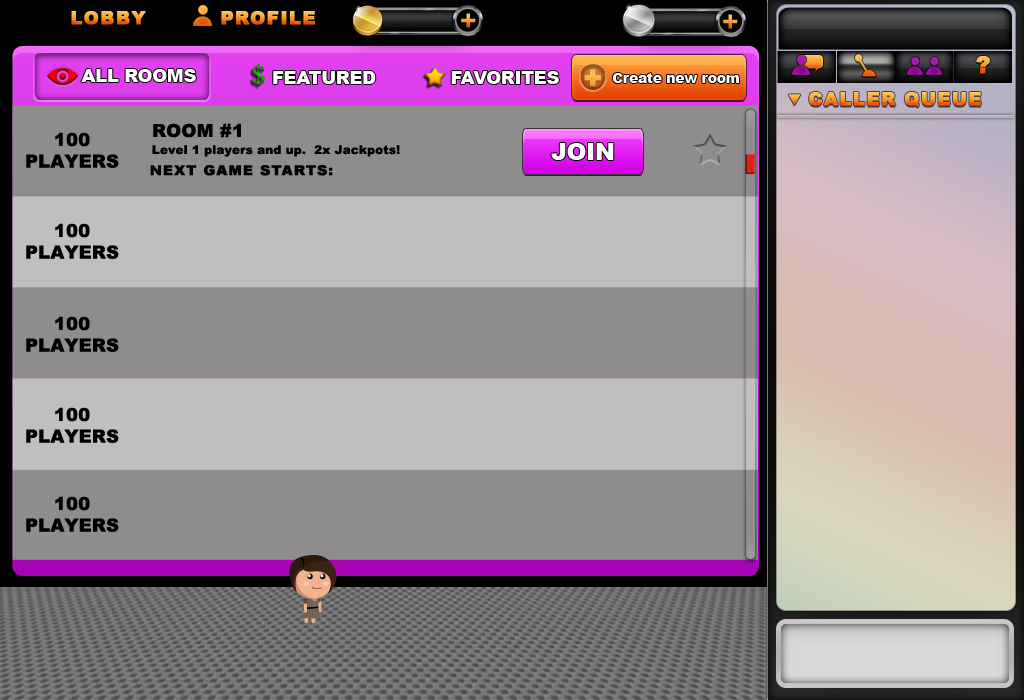
<style>
.page{position:relative;width:1024px;height:700px;background:#8e8c8c}
.page>*{position:absolute;margin:0}
.t1{font:18px "Arial-Black";letter-spacing:0.06em;font-weight:bold}
.t2{font:28px "Terminal";letter-spacing:0.06em}
.t3{font:36px "AdobeDevanagari-Regular";letter-spacing:-0.02em;font-weight:bold}
.t4{font:24px "Arial-Black";letter-spacing:0.06em;font-weight:bold}
.t5{font:18px "Arial-Black";letter-spacing:-0.02em;color:#ffffff}
.t6{font:18px "Arial-Black";letter-spacing:-0.02em;color:#fffefe}
.t7{font:30px "Arial-Black";letter-spacing:-0.02em;color:#f5b24d;font-weight:bold}
.t8{font:14px "Arial-Black";letter-spacing:-0.02em;color:#ffffff}
.t9{font:18px "Arial-Black";letter-spacing:0.01em;color:#000000;text-transform:uppercase}
.t10{font:12px "Arial-Black";letter-spacing:0.01em;color:#000000}
.t11{font:24px "Arial-Black";letter-spacing:-0.02em;color:#fffefe}
.t12{font:13.7px "Arial-Black";letter-spacing:0.06em;color:#000000;font-weight:bold}
</style>
<div class="page">
<p class="t1" style="left:71px;top:11px;width:75px;height:14px">LOBBY</p>
<p class="t2" style="left:461px;top:13px;width:15px;height:15px">+</p>
<p class="t2" style="left:723px;top:14px;width:15px;height:15px">+</p>
<p class="t3" style="left:252px;top:64px;width:13px;height:23px">$</p>
<p class="t4" style="left:976px;top:56px;width:14px;height:18px">?</p>
<p class="t5" style="left:81px;top:69px;width:115px;height:13px">ALL ROOMS</p>
<p class="t6" style="left:273px;top:71px;width:103px;height:13px">FEATURED</p>
<p class="t6" style="left:451px;top:71px;width:108px;height:13px">FAVORITES</p>
<p class="t7" style="left:584px;top:69px;width:18px;height:18px">+</p>
<p class="t8" style="left:612px;top:73px;width:127px;height:10px">Create new room</p>
<p class="t1" style="left:809px;top:92px;width:172px;height:15px">CALLER QUEUE</p>
<p class="t9" style="left:153px;top:123px;width:88px;height:15px">Room #1</p>
<p class="t9" style="left:26px;top:132px;width:93px;height:36px;text-align:center">100<br>Players</p>
<p class="t10" style="left:152px;top:145px;width:248px;height:12px">Level 1 players and up.  2x Jackpots!</p>
<p class="t11" style="left:551px;top:143px;width:63px;height:17px">JOIN</p>
<p class="t12" style="left:150px;top:165px;width:183px;height:11px">NEXT GAME STARTS:</p>
<p class="t9" style="left:26px;top:223px;width:93px;height:36px;text-align:center">100<br>Players</p>
<p class="t9" style="left:26px;top:316px;width:93px;height:36px;text-align:center">100<br>Players</p>
<p class="t9" style="left:26px;top:407px;width:93px;height:36px;text-align:center">100<br>Players</p>
<p class="t9" style="left:26px;top:496px;width:93px;height:36px;text-align:center">100<br>Players</p>
</div>
